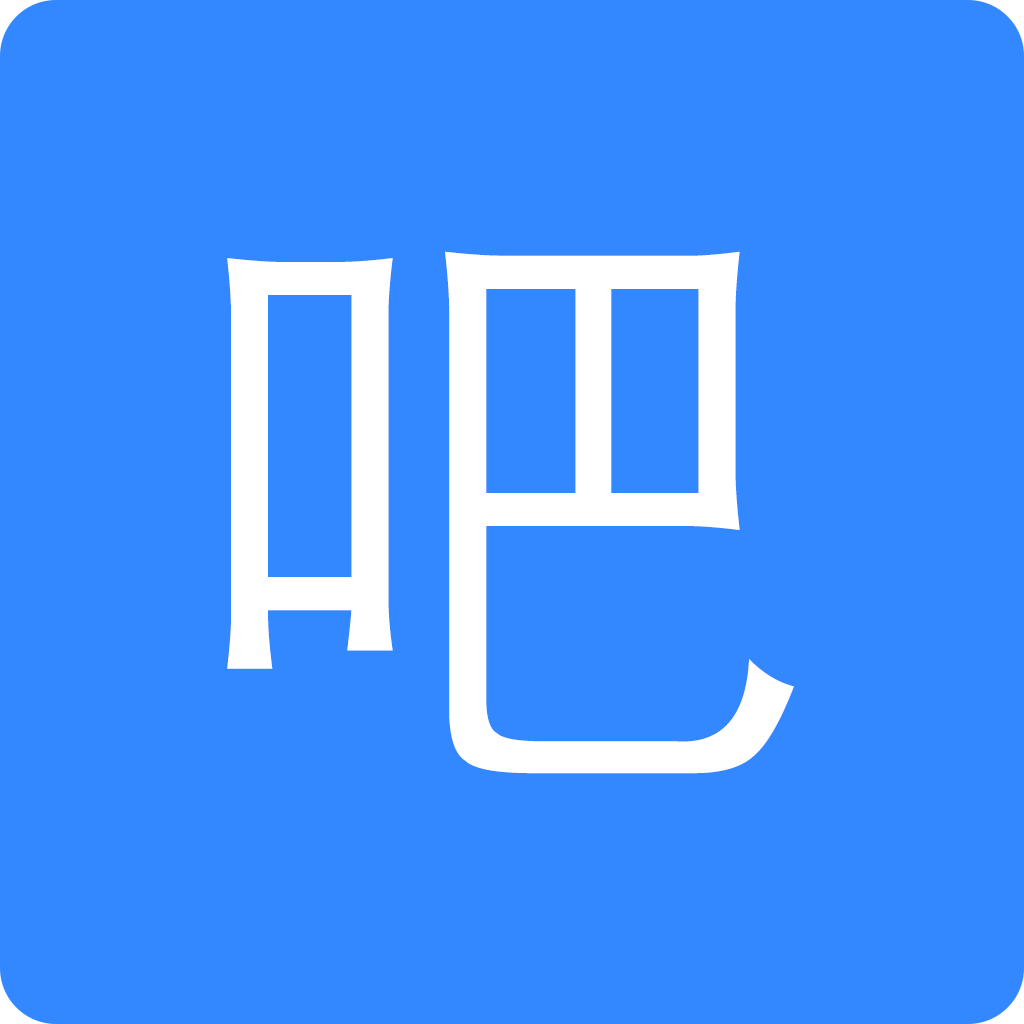
<style>
.page{position:relative;width:1024px;height:1024px;background:#3388ff}
.page>*{position:absolute;margin:0}
.t1{font:660.6px "DengXian-Regular";letter-spacing:0.1em;color:#ffffff}
</style>
<div class="page">
<p class="t1" style="left:227px;top:251px;width:567px;height:523px">吧</p>
</div>
